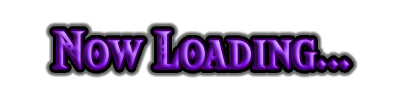
<style>
.page{position:relative;width:400px;height:100px;background:#ffffff}
.page>*{position:absolute;margin:0}
.t1{font:46px "HyliaSerifBeta-Regular"}
</style>
<div class="page">
<p class="t1" style="left:53px;top:31px;width:296px;height:39px">Now Loading...</p>
</div>
